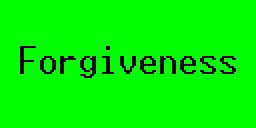
<style>
.page{position:relative;width:256px;height:128px;background:#00ff00}
.page>*{position:absolute;margin:0}
.t1{font:36px "Terminal";color:#000000}
</style>
<div class="page">
<p class="t1" style="left:20px;top:46px;width:216px;height:32px">Forgiveness</p>
</div>
